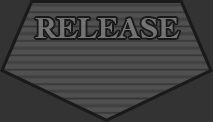
<style>
.page{position:relative;width:213px;height:122px;background:#333333}
.page>*{position:absolute;margin:0}
.t1{font:30px "Cochin-Bold";color:#757575}
</style>
<div class="page">
<p class="t1" style="left:35px;top:18px;width:145px;height:20px">RELEASE</p>
</div>
